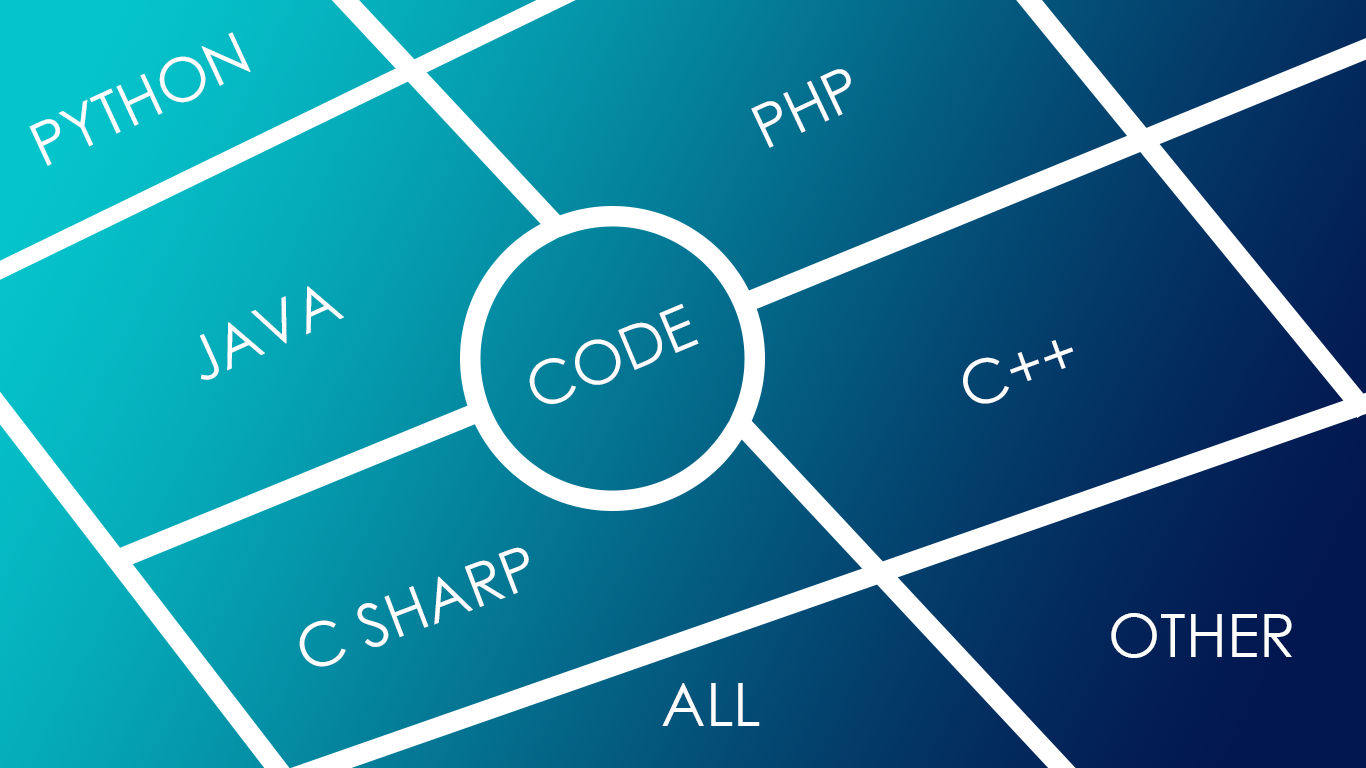
<style>
.page{position:relative;width:1366px;height:768px}
.page>*{position:absolute;margin:0}
.t1{font:60px "CenturyGothic";color:#fefefe}
</style>
<div class="page">
<p class="t1" style="left:29px;top:32px;width:222px;height:134px;rotate:-25deg">PYTHON</p>
<p class="t1" style="left:751px;top:69px;width:100px;height:79px;rotate:-25deg">PHP</p>
<p class="t1" style="left:200px;top:286px;width:144px;height:94px;rotate:-24deg">JAVA</p>
<p class="t1" style="left:529px;top:303px;width:170px;height:101px;rotate:-23deg">CODE</p>
<p class="t1" style="left:963px;top:340px;width:111px;height:64px;rotate:-20deg">C++</p>
<p class="t1" style="left:299px;top:547px;width:230px;height:120px;rotate:-21deg">C SHARP</p>
<p class="t1" style="left:1111px;top:613px;width:181px;height:45px">OTHER</p>
<p class="t1" style="left:662px;top:683px;width:98px;height:43px">ALL</p>
</div>
